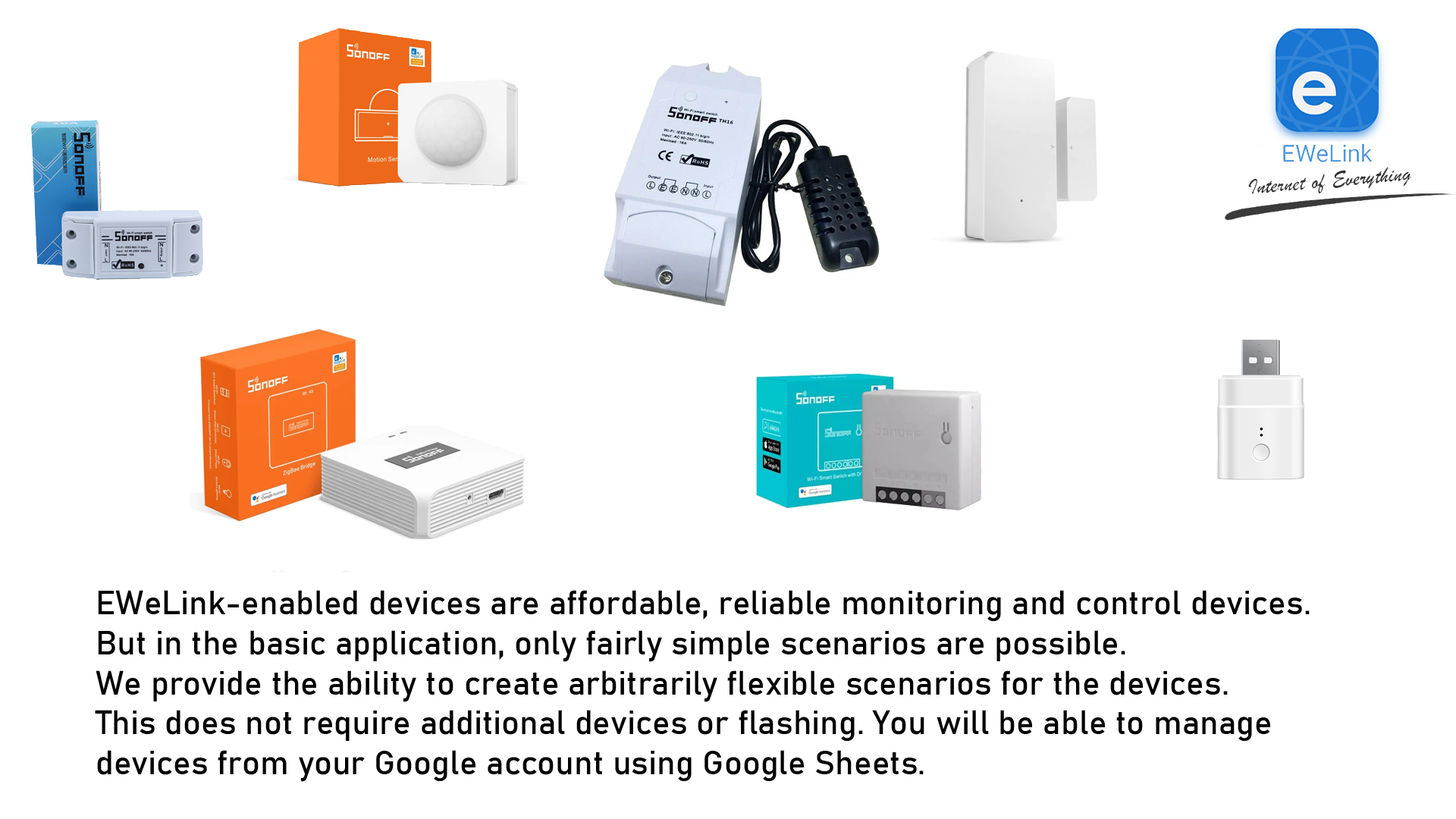
<style>
.page{position:relative;width:1456px;height:819px;background:#ffffff}
.page>*{position:absolute;margin:0}
.t1{font:33.4px "Bahnschrift";color:#000000}
</style>
<div class="page">
<p class="t1" style="left:95px;top:590px;width:1215px;height:192px">EWeLink-enabled devices are affordable, reliable monitoring and control devices.<br>But in the basic application, only fairly simple scenarios are possible.<br>We provide the ability to create arbitrarily flexible scenarios for the devices.<br>This does not require additional devices or flashing. You will be able to manage<br>devices from your Google account using Google Sheets.</p>
</div>
